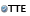
<style>
.page{position:relative;width:30px;height:16px;background:#ffffff}
.page>*{position:absolute;margin:0}
.t1{font:10px "LucidaSansUnicode";color:#020000}
</style>
<div class="page">
<p class="t1" style="left:8px;top:5px;width:18px;height:7px">TTE</p>
</div>
